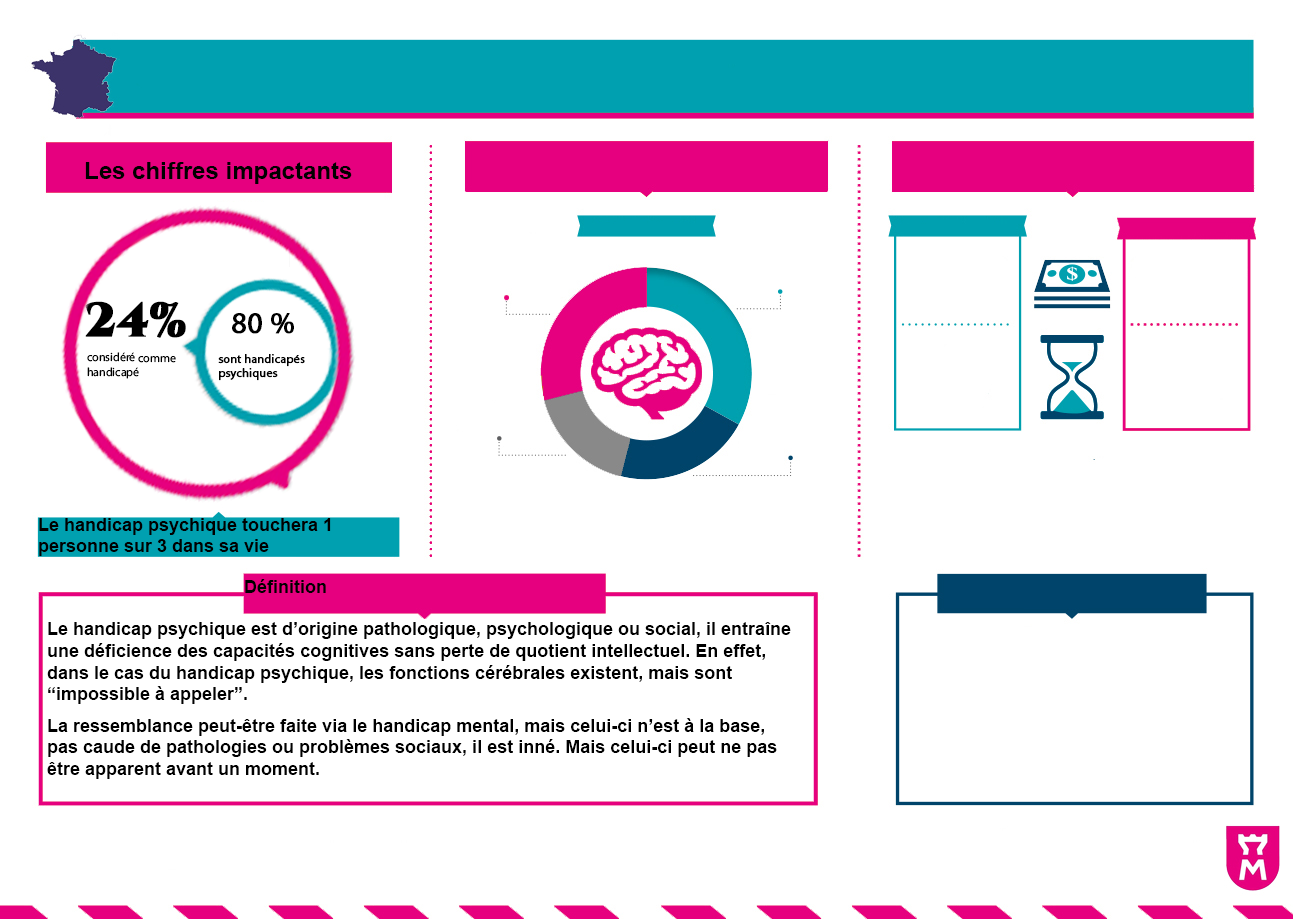
<style>
.page{position:relative;width:1293px;height:919px;background:#ffffff}
.page>*{position:absolute;margin:0}
.t1{font:24px "Arial-BoldMT";color:#000000}
.t2{font:12px "Arial-BoldMT";color:#000000}
.t3{font:48px "Cinzel-Black";color:#000000;font-weight:bold}
.t4{font:30px "MyriadPro-Regular";color:#000000;font-weight:bold}
.t5{font:12px "MyriadPro-Regular";color:#000000}
.t6{font:12px "MyriadPro-Regular";color:#000000;font-weight:bold}
.t7{font:18px "Arial-BoldMT";color:#000000}
</style>
<div class="page">
<p class="t1" style="left:85px;top:162px;width:267px;height:22px"><span class="t2"><br></span>Les chiffres impactants</p>
<p class="t3" style="left:85px;top:301px;width:101px;height:37px">24%</p>
<p class="t4" style="left:232px;top:313px;width:62px;height:21px">80 %</p>
<p class="t5" style="left:87px;top:352px;width:89px;height:27px">considéré comme handicapé</p>
<p class="t6" style="left:218px;top:354px;width:87px;height:27px">sont handicapés psychiques</p>
<p class="t7" style="left:39px;top:518px;width:292px;height:38px">Le handicap psychique touchera 1 personne sur 3 dans sa vie</p>
<p class="t7" style="left:245px;top:579px;width:81px;height:14px">Définition</p>
<p class="t7" style="left:47px;top:622px;width:744px;height:82px">Le handicap psychique est d’origine pathologique, psychologique ou social, il entraîne une déficience des capacités cognitives sans perte de quotient intellectuel. En effet, dans le cas du handicap psychique, les fonctions cérébrales existent, mais sont “impossible à appeler”.</p>
<p class="t7" style="left:47px;top:718px;width:730px;height:61px">La ressemblance peut-être faite via le handicap mental, mais celui-ci n’est à la base, pas caude de pathologies ou problèmes sociaux, il est inné. Mais celui-ci peut ne pas être apparent avant un moment.</p>
</div>
